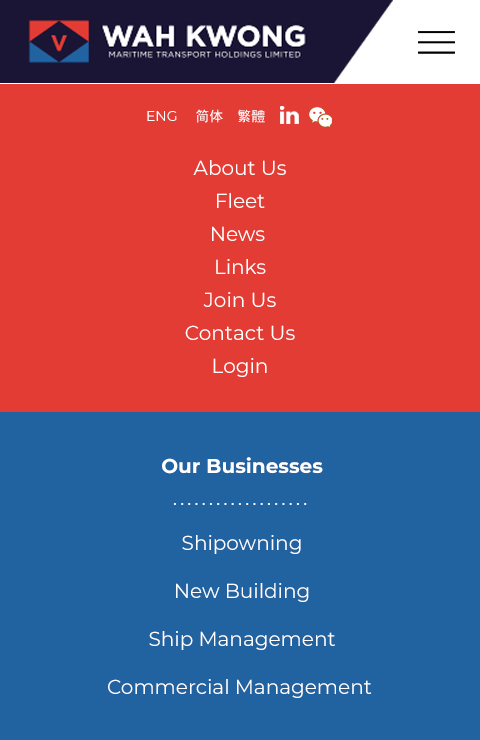
<style>
.page{position:relative;width:480px;height:740px;background:#e23c35}
.page>*{position:absolute;margin:0}
.t1{font:14px "SimHei";color:#ffffff}
.t2{font:14px "Montserrat-Regular";color:#ffffff}
.t3{font:20px/33px "Montserrat-Regular";color:#ffffff}
.t4{font:20px "Montserrat-Bold";color:#ffffff}
.t5{font:14px "Lato-Bold";letter-spacing:0.28em;color:#ffffff}
.t6{font:20px/48px "Montserrat-Regular";color:#ffffff}
</style>
<div class="page">
<p class="t1" style="left:147px;top:109px;width:118px;height:14px"><span class="t2">ENG </span>  简体  繁體</p>
<p class="t3" style="left:185px;top:160px;width:110px;height:217px;text-align:center">About Us<br>Fleet<br>News <br>Links<br>Join Us<br>Contact Us<br>Login</p>
<p class="t4" style="left:162px;top:457px;width:161px;height:17px">Our Businesses</p>
<p class="t5" style="left:173px;top:503px;width:134px;height:2px">...................</p>
<p class="t6" style="left:108px;top:535px;width:264px;height:163px;text-align:center">Shipowning<br>New Building<br>Ship Management<br>Commercial Management</p>
</div>
